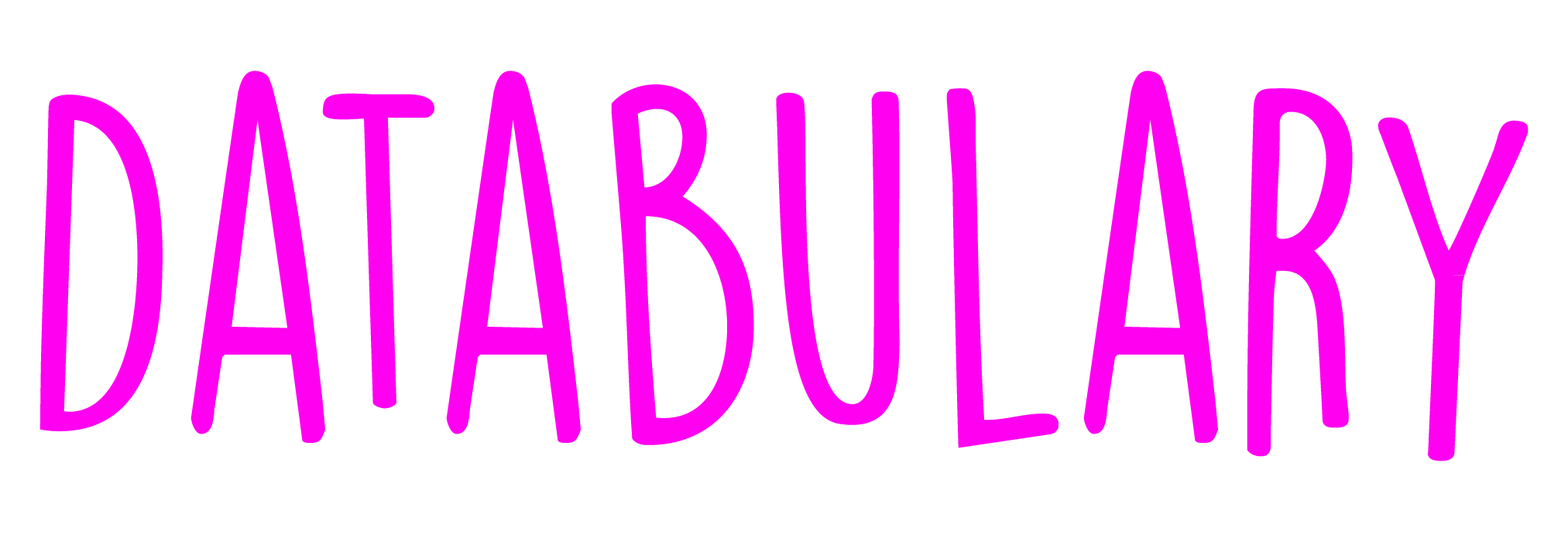
<style>
.page{position:relative;width:1568px;height:542px;background:#ffffff}
.page>*{position:absolute;margin:0}
.t1{font:448px "DKLemonYellowSun";letter-spacing:0.005em;color:#ff00f0}
</style>
<div class="page">
<p class="t1" style="left:39px;top:70px;width:1490px;height:391px">Databulary</p>
</div>
